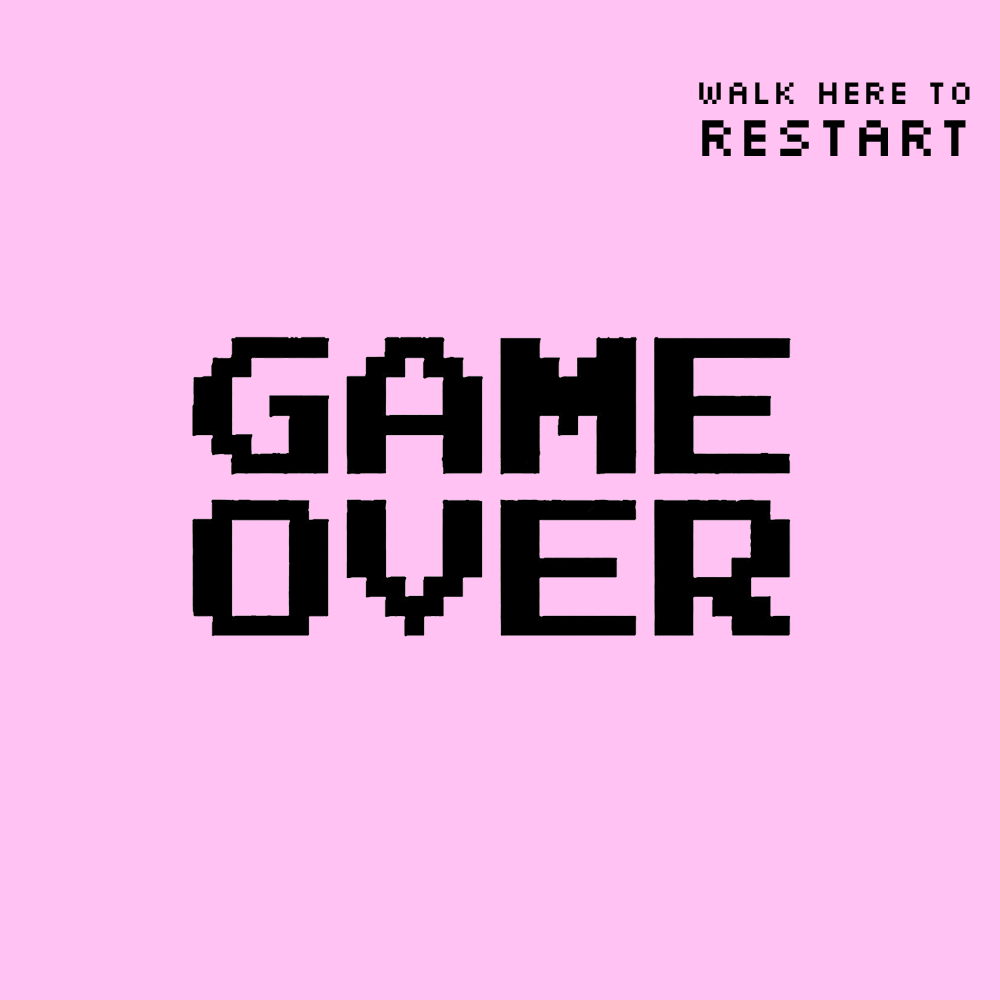
<style>
.page{position:relative;width:1000px;height:1000px;background:#ffc2f3}
.page>*{position:absolute;margin:0}
.t1{font:36px "Silkscreen";color:#000000}
.t2{font:60px "Silkscreen";color:#000000}
</style>
<div class="page">
<p class="t1" style="left:699px;top:82px;width:271px;height:22px">walk here to</p>
<p class="t2" style="left:702px;top:120px;width:264px;height:36px">restart</p>
</div>
